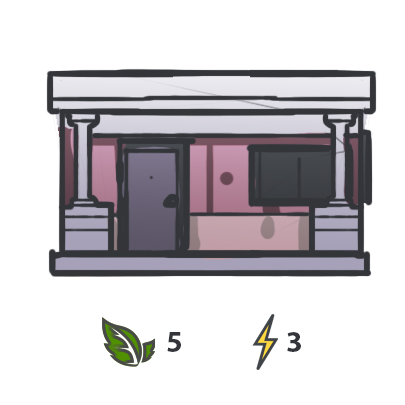
<style>
.page{position:relative;width:405px;height:405px;background:#ffffff}
.page>*{position:absolute;margin:0}
.t1{font:30px "MyriadPro-Bold";color:#34353a}
</style>
<div class="page">
<p class="t1" style="left:167px;top:332px;width:134px;height:20px">5                 3</p>
</div>
